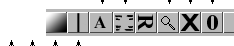
<style>
.page{position:relative;width:234px;height:46px;background:#ffffff}
.page>*{position:absolute;margin:0}
.t1{font:22px "TimesNewRomanPS-BoldMT"}
.t2{font:23.7px "Arial-BoldMT";color:#000000;scale:1.23 1}
.t3{font:22px "TimesNewRomanPS-BoldMT";color:#000000;scale:1.2 1}
</style>
<div class="page">
<p class="t1" style="left:93px;top:15px;width:16px;height:15px">A</p>
<p class="t2" style="left:180px;top:14px;width:20px;height:17px">X</p>
<p class="t3" style="left:207px;top:15px;width:11px;height:15px">0</p>
</div>
